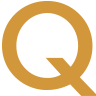
<style>
.page{position:relative;width:96px;height:96px;background:#ffffff}
.page>*{position:absolute;margin:0}
.t1{font:118.4px "FuturaBT-Medium";color:#d2963b}
</style>
<div class="page">
<p class="t1" style="left:2px;top:1px;width:96px;height:95px">Q</p>
</div>
